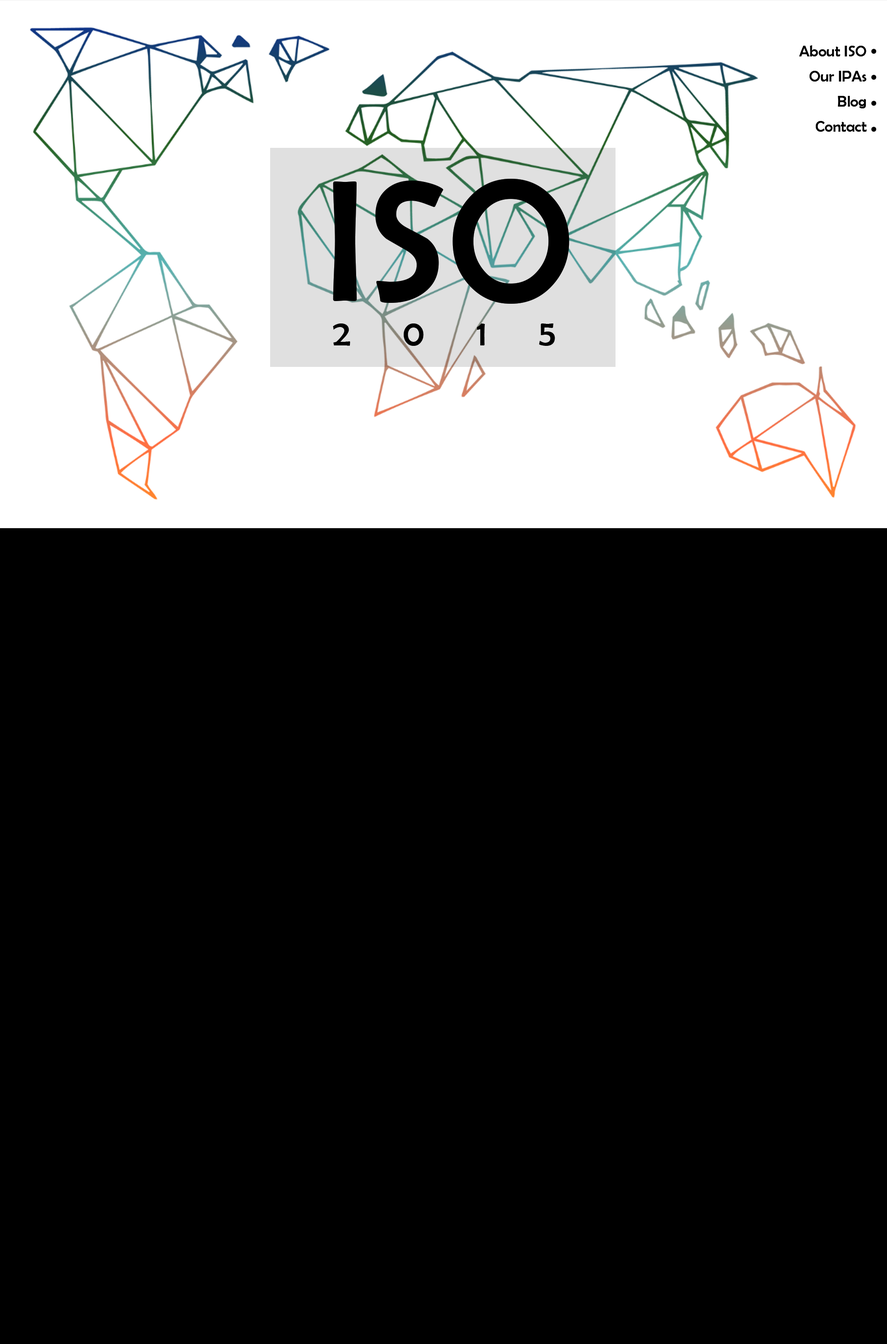
<style>
.page{position:relative;width:887px;height:1344px;background:#000000}
.page>*{position:absolute;margin:0}
.t1{font:15.7px/25.1px "BerlinSansFB-Reg";color:#000000}
.t2{font:174.7px "BerlinSansFB-Reg";color:#000000}
.t3{font:36.3px "BerlinSansFB-Reg";letter-spacing:1.44em;color:#000000}
</style>
<div class="page">
<p class="t1" style="left:799px;top:45px;width:68px;height:87px;text-align:right">About ISO<br>Our IPAs<br>Blog<br>Contact</p>
<p class="t2" style="left:333px;top:178px;width:236px;height:126px">ISO</p>
<p class="t3" style="left:333px;top:323px;width:222px;height:23px">2015</p>
</div>
